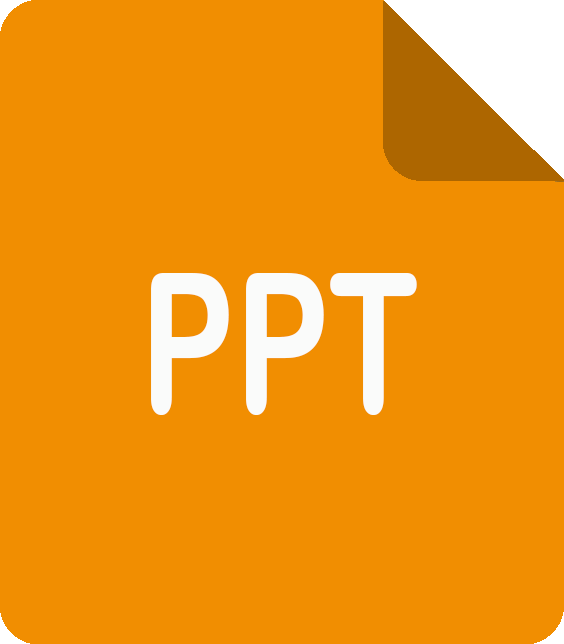
<style>
.page{position:relative;width:564px;height:644px;background:#f18e01}
.page>*{position:absolute;margin:0}
.t1{font:195.5px "ArialRoundedMTBold";color:#fafbfa;scale:0.72 1}
</style>
<div class="page">
<p class="t1" style="left:151px;top:273px;width:266px;height:142px">PPT</p>
</div>
